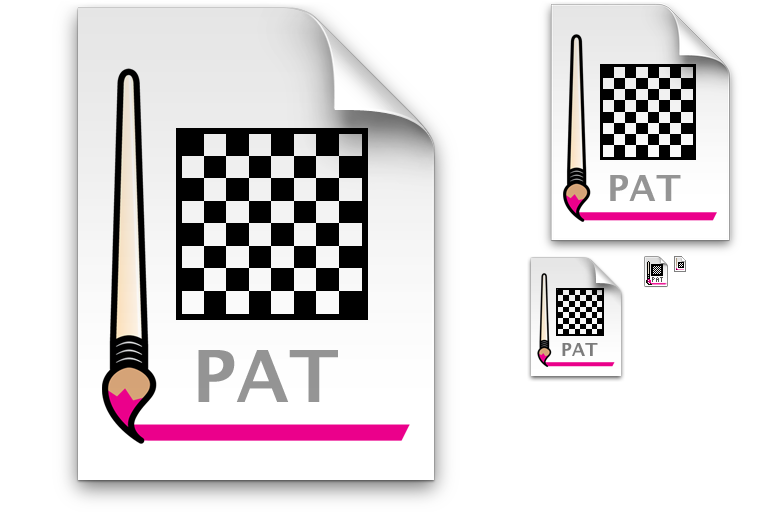
<style>
.page{position:relative;width:768px;height:512px;background:#ffffff}
.page>*{position:absolute;margin:0}
.t1{font:36px "LucidaGrande-Bold";color:#959595}
.t2{font:7px "KKFixed4x7";color:#555555}
.t3{font:72px "LucidaGrande-Bold";color:#959595}
.t4{font:18px "LucidaGrande-Bold";color:#7d7d7d}
</style>
<div class="page">
<p class="t1" style="left:610px;top:175px;width:71px;height:26px">PAT</p>
<p class="t2" style="left:652px;top:277px;width:11px;height:5px">PAT</p>
<p class="t3" style="left:198px;top:350px;width:140px;height:52px">PAT</p>
<p class="t4" style="left:562px;top:343px;width:36px;height:13px">PAT</p>
</div>
